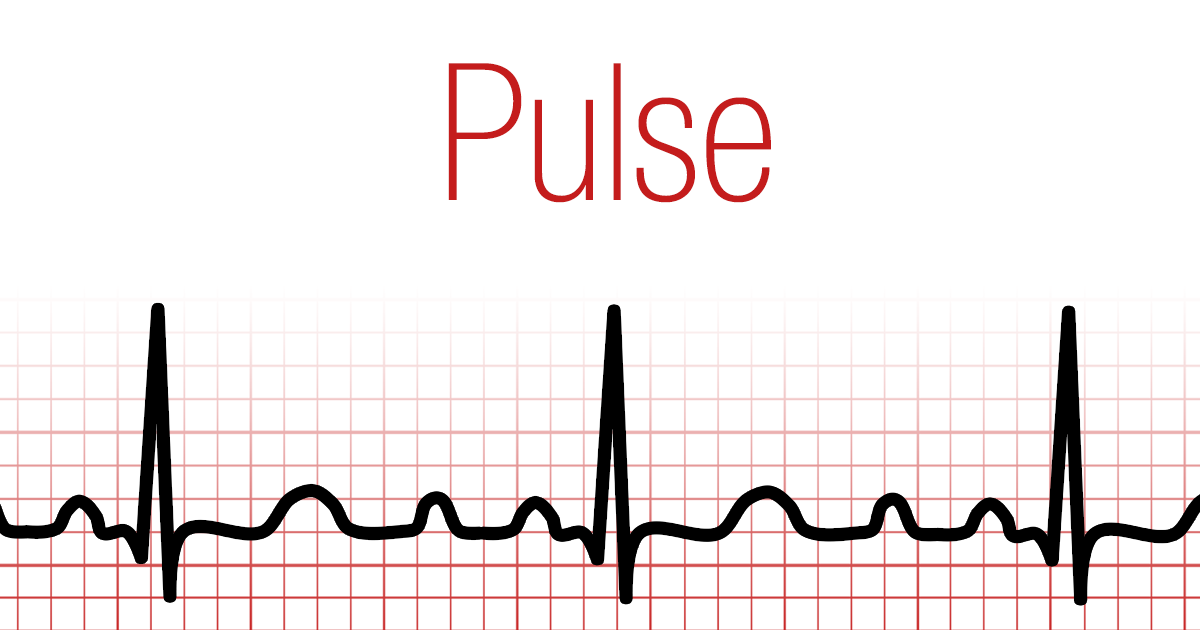
<style>
.page{position:relative;width:1200px;height:630px;background:#ffffff}
.page>*{position:absolute;margin:0}
.t1{font:191.5px "HelveticaNeueLTStd-ThCn";color:#c41c1c}
</style>
<div class="page">
<p class="t1" style="left:448px;top:63px;width:323px;height:140px">Pulse</p>
</div>
